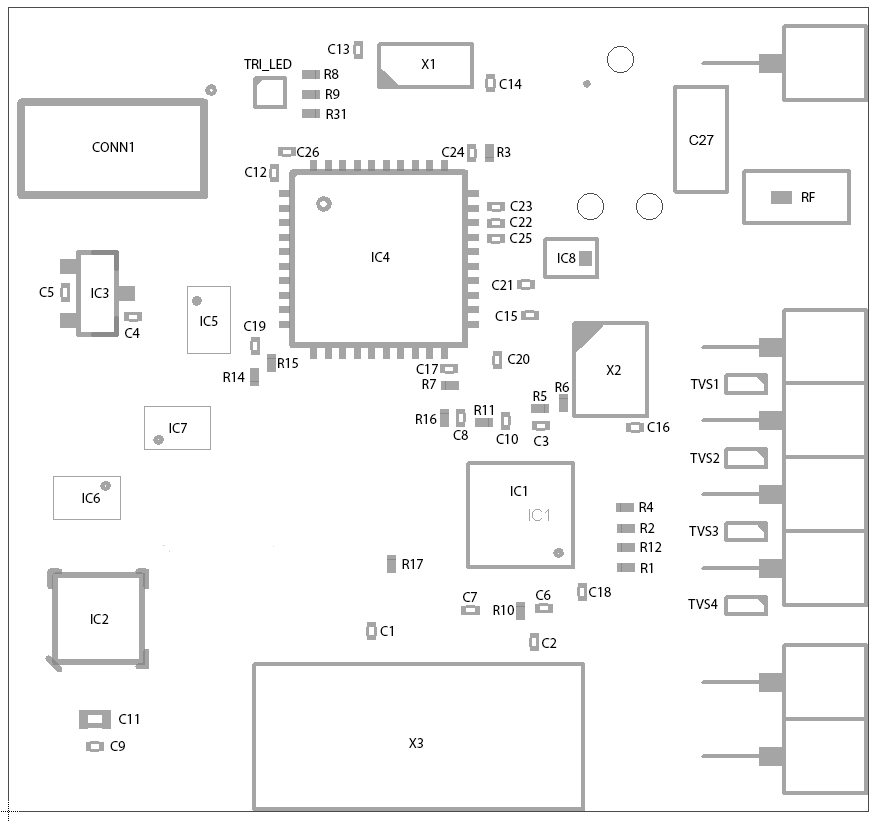
<style>
.page{position:relative;width:876px;height:821px;background:#ffffff}
.page>*{position:absolute;margin:0}
.t1{font:14px "MyriadPro-Regular";color:#000000}
.t2{font:14px "ArialMT";color:#000000}
</style>
<div class="page">
<p class="t1" style="left:328px;top:44px;width:21px;height:10px">C13</p>
<p class="t1" style="left:244px;top:59px;width:48px;height:12px">TRI_LED</p>
<p class="t1" style="left:421px;top:59px;width:13px;height:10px">X1</p>
<p class="t1" style="left:324px;top:69px;width:15px;height:10px">R8</p>
<p class="t1" style="left:326px;top:89px;width:14px;height:10px">R9</p>
<p class="t1" style="left:499px;top:79px;width:23px;height:10px">C14</p>
<p class="t1" style="left:326px;top:109px;width:19px;height:10px">R31</p>
<p class="t2" style="left:689px;top:135px;width:25px;height:10px">C27</p>
<p class="t1" style="left:92px;top:142px;width:41px;height:10px">CONN1</p>
<p class="t1" style="left:297px;top:147px;width:22px;height:10px">C26</p>
<p class="t1" style="left:442px;top:147px;width:23px;height:10px">C24</p>
<p class="t1" style="left:497px;top:147px;width:14px;height:10px">R3</p>
<p class="t1" style="left:245px;top:167px;width:22px;height:10px">C12</p>
<p class="t1" style="left:802px;top:192px;width:13px;height:10px">RF</p>
<p class="t1" style="left:510px;top:201px;width:22px;height:10px">C23</p>
<p class="t1" style="left:510px;top:217px;width:22px;height:10px">C22</p>
<p class="t1" style="left:510px;top:233px;width:22px;height:10px">C25</p>
<p class="t1" style="left:372px;top:252px;width:18px;height:10px">IC4</p>
<p class="t1" style="left:558px;top:253px;width:18px;height:10px">IC8</p>
<p class="t1" style="left:492px;top:280px;width:20px;height:10px">C21</p>
<p class="t1" style="left:39px;top:287px;width:15px;height:10px">C5</p>
<p class="t1" style="left:91px;top:288px;width:18px;height:10px">IC3</p>
<p class="t1" style="left:200px;top:316px;width:18px;height:10px">IC5</p>
<p class="t1" style="left:495px;top:311px;width:22px;height:10px">C15</p>
<p class="t1" style="left:125px;top:328px;width:15px;height:10px">C4</p>
<p class="t1" style="left:244px;top:321px;width:22px;height:10px">C19</p>
<p class="t1" style="left:278px;top:358px;width:20px;height:10px">R15</p>
<p class="t1" style="left:416px;top:364px;width:22px;height:10px">C17</p>
<p class="t1" style="left:508px;top:354px;width:22px;height:10px">C20</p>
<p class="t1" style="left:606px;top:365px;width:15px;height:10px">X2</p>
<p class="t1" style="left:223px;top:372px;width:22px;height:10px">R14</p>
<p class="t1" style="left:422px;top:379px;width:14px;height:10px">R7</p>
<p class="t1" style="left:555px;top:382px;width:14px;height:10px">R6</p>
<p class="t1" style="left:690px;top:379px;width:28px;height:10px">TVS1</p>
<p class="t1" style="left:533px;top:391px;width:14px;height:10px">R5</p>
<p class="t1" style="left:416px;top:414px;width:21px;height:10px">R16</p>
<p class="t1" style="left:474px;top:405px;width:19px;height:10px">R11</p>
<p class="t1" style="left:169px;top:423px;width:18px;height:10px">IC7</p>
<p class="t1" style="left:647px;top:422px;width:23px;height:10px">C16</p>
<p class="t1" style="left:453px;top:430px;width:15px;height:10px">C8</p>
<p class="t1" style="left:496px;top:434px;width:22px;height:10px">C10</p>
<p class="t1" style="left:534px;top:436px;width:15px;height:10px">C3</p>
<p class="t1" style="left:690px;top:453px;width:30px;height:10px">TVS2</p>
<p class="t1" style="left:511px;top:486px;width:16px;height:10px">IC1</p>
<p class="t1" style="left:82px;top:493px;width:18px;height:10px">IC6</p>
<p class="t1" style="left:639px;top:502px;width:15px;height:10px">R4</p>
<p class="t1" style="left:640px;top:523px;width:15px;height:10px">R2</p>
<p class="t1" style="left:689px;top:526px;width:29px;height:10px">TVS3</p>
<p class="t1" style="left:640px;top:542px;width:22px;height:10px">R12</p>
<p class="t1" style="left:402px;top:559px;width:21px;height:10px">R17</p>
<p class="t1" style="left:641px;top:563px;width:12px;height:10px">R1</p>
<p class="t1" style="left:463px;top:592px;width:14px;height:10px">C7</p>
<p class="t1" style="left:536px;top:590px;width:15px;height:10px">C6</p>
<p class="t1" style="left:589px;top:587px;width:22px;height:10px">C18</p>
<p class="t1" style="left:493px;top:605px;width:21px;height:10px">R10</p>
<p class="t1" style="left:688px;top:599px;width:30px;height:10px">TVS4</p>
<p class="t1" style="left:91px;top:614px;width:18px;height:10px">IC2</p>
<p class="t1" style="left:380px;top:626px;width:13px;height:10px">C1</p>
<p class="t1" style="left:542px;top:638px;width:15px;height:10px">C2</p>
<p class="t1" style="left:119px;top:714px;width:20px;height:10px">C11</p>
<p class="t1" style="left:110px;top:741px;width:15px;height:10px">C9</p>
<p class="t1" style="left:409px;top:738px;width:14px;height:10px">X3</p>
</div>
